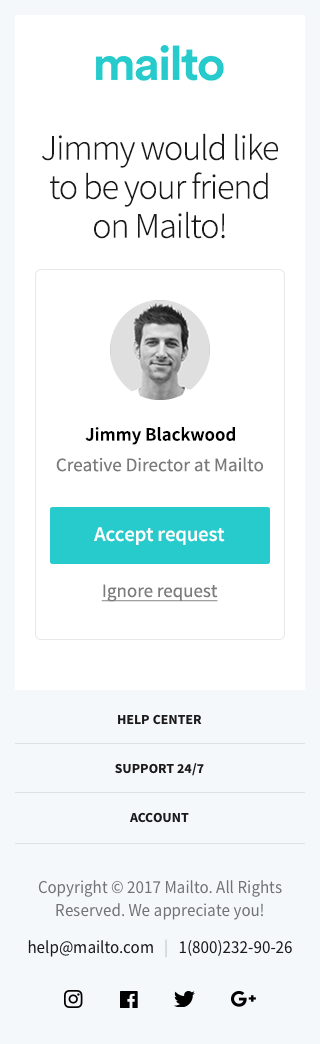
<style>
.page{position:relative;width:320px;height:1044px;background:#ffffff}
.page>*{position:absolute;margin:0}
.t1{font:36px/39px "SourceSansPro-Light";letter-spacing:-0.03em;color:#1a1a1a}
.t2{font:19px "SourceSansPro-Semibold";color:#000000}
.t3{font:19px "SourceSansPro-Regular";color:#7b7b7b}
.t4{font:21px "SourceSansPro-Semibold";letter-spacing:-0.015em;color:#ffffff}
.t5{font:19px "SourceSansPro-Regular";color:#7b7b7b;text-decoration:underline}
.t6{font:14px/49px "SourceSansPro-Bold";color:#1a1a1a}
.t7{font:17px/23px "SourceSansPro-Regular";color:#727374}
.t8{font:17px/23px "SourceSansPro-Regular";color:#1a1a1a}
.t9{font:17px/23px "SourceSansPro-Regular";color:#bebebe}
</style>
<div class="page">
<p class="t1" style="left:42px;top:133px;width:236px;height:106px;text-align:center">Jimmy would like<br>to be your friend<br>on Mailto!</p>
<p class="t2" style="left:85px;top:427px;width:150px;height:18px">Jimmy Blackwood</p>
<p class="t3" style="left:56px;top:457px;width:207px;height:15px">Creative Director at Mailto</p>
<p class="t4" style="left:94px;top:527px;width:131px;height:18px">Accept request</p>
<p class="t5" style="left:101px;top:584px;width:117px;height:18px">Ignore request</p>
<p class="t6" style="left:115px;top:714px;width:89px;height:109px;text-align:center">HELP CENTER<br>SUPPORT 24/7<br>ACCOUNT</p>
<p class="t7" style="left:28px;top:880px;width:264px;height:78px;text-align:center">Copyright © 2017 Mailto. All Rights Reserved. We appreciate you!<br><span class="t8">help@mailto.com   </span><span class="t9">|   </span><span class="t8">1(800)232-90-26</span></p>
</div>
